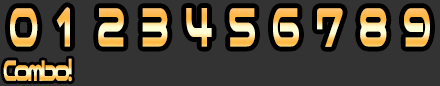
<style>
.page{position:relative;width:440px;height:86px;background:#333333}
.page>*{position:absolute;margin:0}
.t1{font:66.1px "NicoKaku";letter-spacing:0.365em;scale:0.58 1}
.t2{font:34.8px "NicoKaku";letter-spacing:-0.145em;scale:0.58 1}
</style>
<div class="page">
<p class="t1" style="left:10px;top:7px;width:420px;height:40px">0123456789</p>
<p class="t2" style="left:3px;top:58px;width:69px;height:24px">Combo!</p>
</div>
